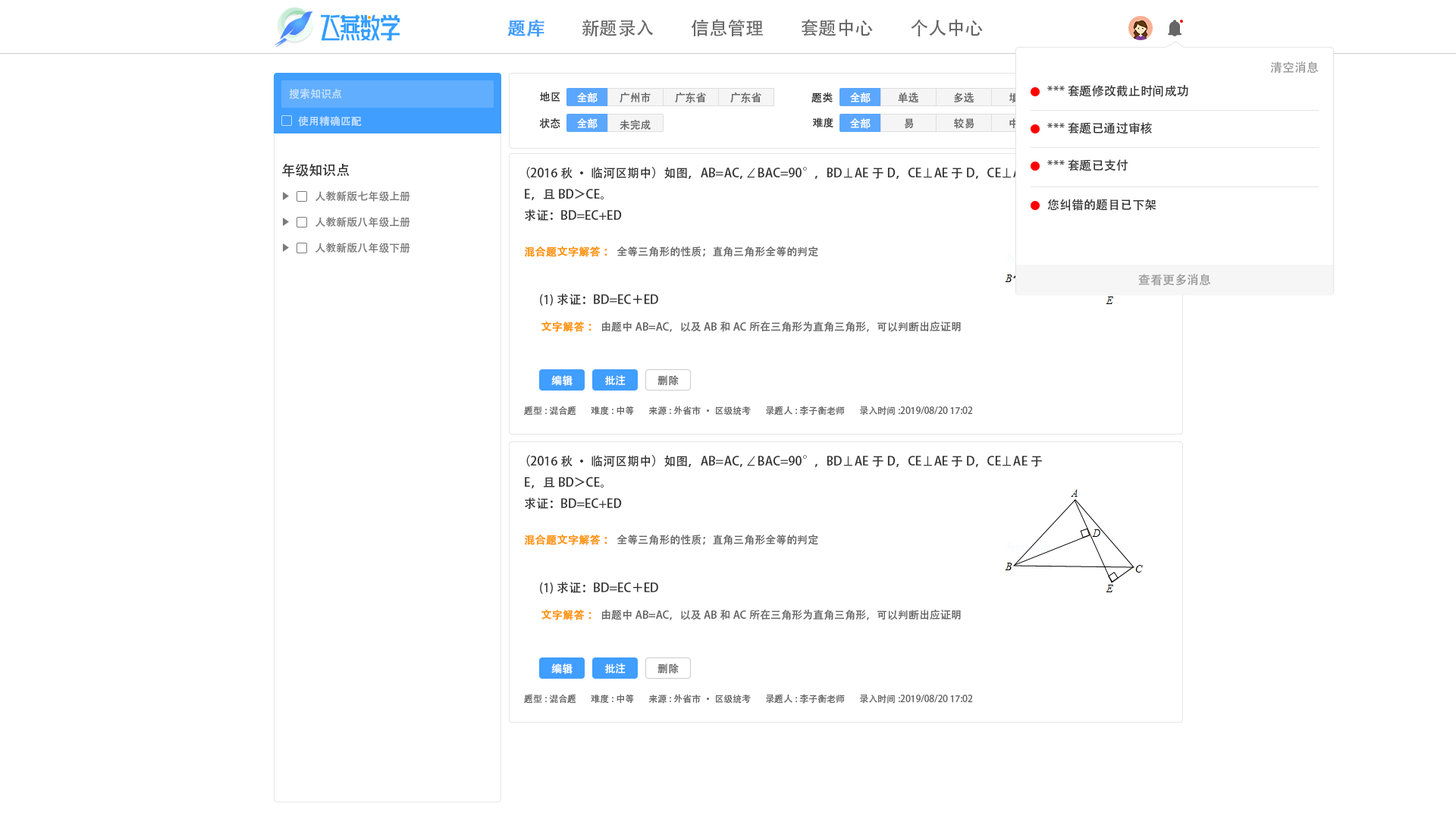
<style>
.page{position:relative;width:1456px;height:819px;background:#ffffff}
.page>*{position:absolute;margin:0}
.t1{font:18.2px "AdobeHeitiStd-Regular";color:#409eff;font-weight:bold}
.t2{font:18.2px "AdobeHeitiStd-Regular";color:#666666}
.t3{font:12.1px "AdobeHeitiStd-Regular";color:#999999}
.t4{font:10.6px "AdobeHeitiStd-Regular";color:#c3e0ff}
.t5{font:12.1px "AdobeHeitiStd-Regular";color:#333333}
.t6{font:10.6px "AdobeHeitiStd-Regular";color:#333333}
.t7{font:10.6px "AdobeHeitiStd-Regular";color:#ffffff}
.t8{font:10.6px "AdobeHeitiStd-Regular";color:#666666}
.t9{font:10.6px "AdobeHeitiStd-Regular"}
.t10{font:13.6px "AdobeHeitiStd-Regular";color:#333333}
.t11{font:10.6px "AdobeHeitiStd-Regular";color:#7b7b7b}
.t12{font:10.6px "AdobeHeitiStd-Regular";color:#ff9814;font-weight:bold}
.t13{font:9.1px "AdobeHeitiStd-Regular";color:#666666}
</style>
<div class="page">
<p class="t1" style="left:507px;top:20px;width:37px;height:17px">题库</p>
<p class="t2" style="left:582px;top:20px;width:72px;height:16px">新题录入</p>
<p class="t2" style="left:691px;top:19px;width:72px;height:18px">信息管理</p>
<p class="t2" style="left:802px;top:19px;width:71px;height:17px">套题中心</p>
<p class="t2" style="left:911px;top:19px;width:72px;height:17px">个人中心</p>
<p class="t3" style="left:1270px;top:61px;width:49px;height:13px">清空消息</p>
<p class="t4" style="left:289px;top:88px;width:53px;height:11px">搜索知识点</p>
<p class="t5" style="left:1047px;top:85px;width:141px;height:12px">***套题修改截止时间成功</p>
<p class="t6" style="left:540px;top:92px;width:20px;height:10px">地区</p>
<p class="t7" style="left:577px;top:93px;width:21px;height:10px">全部</p>
<p class="t8" style="left:620px;top:92px;width:31px;height:11px">广州市</p>
<p class="t8" style="left:675px;top:92px;width:31px;height:11px">广东省</p>
<p class="t8" style="left:730px;top:92px;width:31px;height:11px">广东省</p>
<p class="t6" style="left:811px;top:93px;width:22px;height:10px">题类</p>
<p class="t7" style="left:850px;top:93px;width:21px;height:10px">全部</p>
<p class="t8" style="left:898px;top:92px;width:20px;height:11px">单选</p>
<p class="t8" style="left:954px;top:92px;width:20px;height:10px">多选</p>
<p class="t9" style="left:1009px;top:93px;width:21px;height:10px">填空</p>
<p class="t4" style="left:298px;top:116px;width:64px;height:11px">使用精确匹配</p>
<p class="t6" style="left:539px;top:118px;width:21px;height:11px">状态</p>
<p class="t7" style="left:577px;top:118px;width:21px;height:11px">全部</p>
<p class="t8" style="left:620px;top:120px;width:31px;height:10px">未完成</p>
<p class="t6" style="left:813px;top:118px;width:20px;height:10px">难度</p>
<p class="t7" style="left:850px;top:118px;width:21px;height:11px">全部</p>
<p class="t8" style="left:904px;top:118px;width:10px;height:11px">易</p>
<p class="t8" style="left:954px;top:118px;width:20px;height:11px">较易</p>
<p class="t9" style="left:1009px;top:118px;width:20px;height:10px">中等</p>
<p class="t5" style="left:1047px;top:122px;width:105px;height:12px">***套题已通过审核</p>
<p class="t5" style="left:1047px;top:159px;width:81px;height:12px">***套题已支付</p>
<p class="t10" style="left:282px;top:163px;width:68px;height:14px">年级知识点</p>
<p class="t5" style="left:525px;top:167px;width:517px;height:54px">（2016秋·临河区期中）如图，AB=AC，∠BAC=90°，BD⊥AE于D，CE⊥AE于D，CE⊥AE于E，且BD＞CE。<br>求证：BD=EC+ED</p>
<p class="t11" style="left:315px;top:191px;width:95px;height:11px">人教新版七年级上册</p>
<p class="t5" style="left:1047px;top:199px;width:109px;height:12px">您纠错的题目已下架</p>
<p class="t11" style="left:315px;top:217px;width:95px;height:10px">人教新版八年级上册</p>
<p class="t11" style="left:315px;top:243px;width:95px;height:10px">人教新版八年级下册</p>
<p class="t8" style="left:524px;top:246px;width:294px;height:11px"><span class="t12">混合题文字解答：</span>全等三角形的性质；直角三角形全等的判定</p>
<p class="t3" style="left:1138px;top:274px;width:73px;height:12px">查看更多消息</p>
<p class="t5" style="left:540px;top:293px;width:118px;height:13px">(1)求证：BD=EC＋ED</p>
<p class="t8" style="left:541px;top:321px;width:420px;height:11px"><span class="t12">文字解答：</span>由题中AB=AC，以及AB和AC所在三角形为直角三角形，可以判断出应证明</p>
<p class="t7" style="left:551px;top:375px;width:22px;height:11px">编辑</p>
<p class="t7" style="left:604px;top:375px;width:22px;height:10px">批注</p>
<p class="t8" style="left:657px;top:375px;width:22px;height:10px">删除</p>
<p class="t13" style="left:524px;top:406px;width:52px;height:9px">题型:混合题</p>
<p class="t13" style="left:591px;top:406px;width:43px;height:9px">难度:中等</p>
<p class="t13" style="left:648px;top:406px;width:103px;height:10px">来源:外省市·区级统考</p>
<p class="t13" style="left:766px;top:406px;width:79px;height:10px">录题人:李子衡老师</p>
<p class="t13" style="left:860px;top:406px;width:113px;height:10px">录入时间:2019/08/20 17:02</p>
<p class="t5" style="left:525px;top:455px;width:517px;height:55px">（2016秋·临河区期中）如图，AB=AC，∠BAC=90°，BD⊥AE于D，CE⊥AE于D，CE⊥AE于E，且BD＞CE。<br>求证：BD=EC+ED</p>
<p class="t8" style="left:524px;top:534px;width:294px;height:11px"><span class="t12">混合题文字解答：</span>全等三角形的性质；直角三角形全等的判定</p>
<p class="t5" style="left:540px;top:582px;width:118px;height:12px">(1)求证：BD=EC＋ED</p>
<p class="t8" style="left:541px;top:609px;width:420px;height:11px"><span class="t12">文字解答：</span>由题中AB=AC，以及AB和AC所在三角形为直角三角形，可以判断出应证明</p>
<p class="t7" style="left:551px;top:664px;width:22px;height:10px">编辑</p>
<p class="t7" style="left:604px;top:663px;width:22px;height:10px">批注</p>
<p class="t8" style="left:657px;top:664px;width:22px;height:9px">删除</p>
<p class="t13" style="left:524px;top:694px;width:52px;height:9px">题型:混合题</p>
<p class="t13" style="left:591px;top:694px;width:43px;height:9px">难度:中等</p>
<p class="t13" style="left:648px;top:694px;width:103px;height:10px">来源:外省市·区级统考</p>
<p class="t13" style="left:766px;top:694px;width:79px;height:10px">录题人:李子衡老师</p>
<p class="t13" style="left:860px;top:694px;width:113px;height:10px">录入时间:2019/08/20 17:02</p>
</div>
